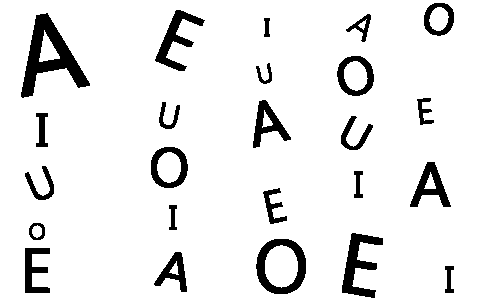
<style>
.page{position:relative;width:500px;height:300px;background:#ffffff}
.page>*{position:absolute;margin:0}
.t1{font:43.7px "MyanmarText";color:#000000;font-weight:bold;scale:0.96 1}
.t2{font:108.6px "MyanmarText";color:#000000;font-weight:bold}
.t3{font:78.8px "MyanmarText";color:#000000;font-weight:bold}
.t4{font:37px "MyanmarText";color:#000000;font-weight:bold}
.t5{font:26.5px "MyanmarText";color:#000000;font-weight:bold}
.t6{font:26px "MyanmarText";color:#000000;font-weight:bold;scale:0.96 1}
.t7{font:53.4px "MyanmarText";color:#000000;font-weight:bold;scale:0.96 1}
.t8{font:34.3px "MyanmarText";color:#000000;font-weight:bold;scale:0.96 1}
.t9{font:61.3px "MyanmarText";color:#000000;font-weight:bold}
.t10{font:35.7px "MyanmarText";color:#000000;font-weight:bold}
.t11{font:46.7px "MyanmarText";color:#000000;font-weight:bold}
.t12{font:44.3px "MyanmarText";color:#000000;font-weight:bold;scale:0.96 1}
.t13{font:54.7px "MyanmarText";color:#000000;font-weight:bold}
.t14{font:37.2px "MyanmarText";color:#000000;font-weight:bold}
.t15{font:62.9px "MyanmarText";color:#000000;font-weight:bold}
.t16{font:45.7px "MyanmarText";color:#000000;font-weight:bold}
.t17{font:34.1px "MyanmarText";color:#000000;font-weight:bold}
.t18{font:23.3px "MyanmarText";color:#000000;font-weight:bold}
.t19{font:83.9px "MyanmarText";color:#000000;font-weight:bold}
.t20{font:74.9px "MyanmarText";color:#000000;font-weight:bold;scale:0.96 1}
.t21{font:52.8px "MyanmarText";color:#000000;font-weight:bold}
</style>
<div class="page">
<p class="t1" style="left:424px;top:3px;width:30px;height:33px;rotate:13deg">O</p>
<p class="t2" style="left:21px;top:13px;width:69px;height:85px;rotate:-10deg">A</p>
<p class="t3" style="left:155px;top:10px;width:50px;height:61px;rotate:23deg">E</p>
<p class="t4" style="left:346px;top:14px;width:25px;height:28px;rotate:34deg">A</p>
<p class="t5" style="left:264px;top:18px;width:6px;height:19px">I</p>
<p class="t6" style="left:256px;top:63px;width:16px;height:21px;rotate:-12deg">U</p>
<p class="t7" style="left:337px;top:56px;width:37px;height:40px;rotate:-13deg">O</p>
<p class="t8" style="left:159px;top:102px;width:21px;height:27px;rotate:12deg">U</p>
<p class="t9" style="left:253px;top:100px;width:38px;height:48px;rotate:-13deg">A</p>
<p class="t10" style="left:417px;top:98px;width:17px;height:27px;rotate:-6deg">E</p>
<p class="t11" style="left:36px;top:113px;width:12px;height:34px">I</p>
<p class="t12" style="left:341px;top:116px;width:32px;height:34px;rotate:28deg">U</p>
<p class="t13" style="left:151px;top:147px;width:37px;height:41px">O</p>
<p class="t1" style="left:25px;top:166px;width:29px;height:34px;rotate:-22deg">U</p>
<p class="t14" style="left:354px;top:171px;width:9px;height:27px">I</p>
<p class="t15" style="left:410px;top:162px;width:41px;height:45px">A</p>
<p class="t16" style="left:263px;top:188px;width:24px;height:36px;rotate:-12deg">E</p>
<p class="t17" style="left:169px;top:205px;width:8px;height:25px">I</p>
<p class="t18" style="left:29px;top:223px;width:16px;height:17px">O</p>
<p class="t19" style="left:342px;top:233px;width:41px;height:65px;rotate:10deg">E</p>
<p class="t20" style="left:256px;top:239px;width:50px;height:55px">O</p>
<p class="t15" style="left:25px;top:248px;width:25px;height:45px">E</p>
<p class="t21" style="left:154px;top:252px;width:33px;height:40px;rotate:13deg">A</p>
<p class="t14" style="left:445px;top:266px;width:9px;height:27px">I</p>
</div>
